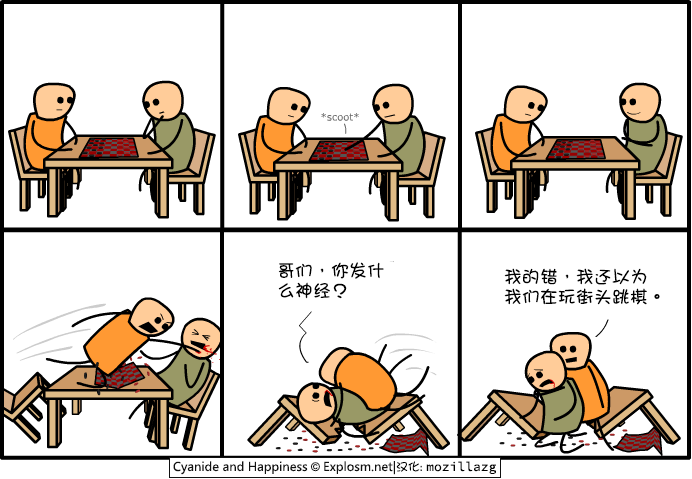
<style>
.page{position:relative;width:692px;height:479px;background:#ffffff}
.page>*{position:absolute;margin:0}
.t1{font:18px/20px "DFGirl";color:#000000}
</style>
<div class="page">
<p class="t1" style="left:278px;top:262px;width:106px;height:37px">哥们，你发什<br>么神经？</p>
<p class="t1" style="left:504px;top:268px;width:156px;height:37px">我的错，我还以为<br>我们在玩街头跳棋。</p>
</div>
